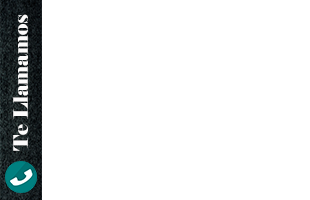
<style>
.page{position:relative;width:310px;height:200px;background:#ffffff}
.page>*{position:absolute;margin:0}
.t1{font:20px "Elephant-Regular";color:#fcfbfb}
.t2{font:24px "MicrosoftPhagsPa-Bold";color:#fcfbfb}
</style>
<div class="page">
<p class="t1" style="left:13px;top:14px;width:15px;height:137px;rotate:-90deg"><span class="t2">      </span>Te Llamamos</p>
</div>
